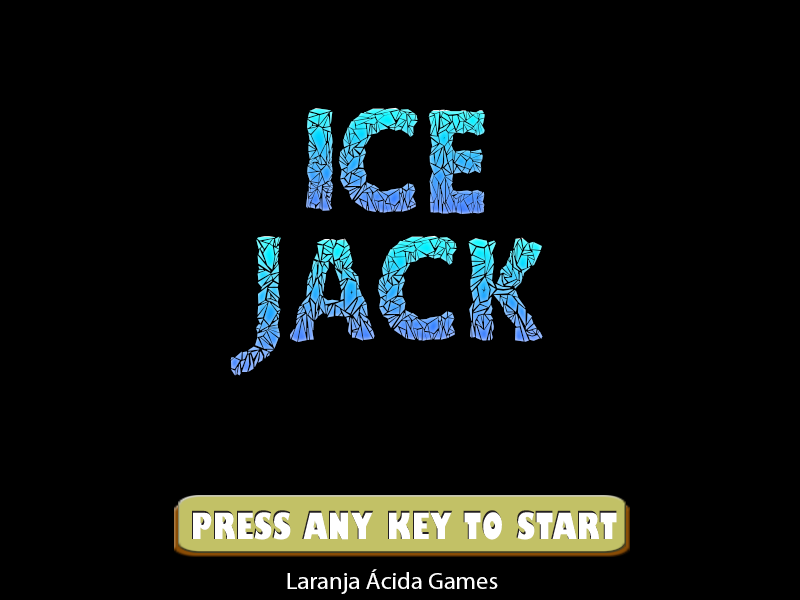
<style>
.page{position:relative;width:800px;height:600px;background:#000000}
.page>*{position:absolute;margin:0}
.t1{font:134.8px "CrystallineNegative";scale:0.93 1}
.t2{font:37.9px "GillSans-UltraBoldCondensed";color:#ffffff}
.t3{font:23.9px "MyriadPro-Regular";color:#ffffff}
</style>
<div class="page">
<p class="t1" style="left:306px;top:108px;width:27px;height:103px">I</p>
<p class="t1" style="left:338px;top:107px;width:80px;height:106px">C</p>
<p class="t1" style="left:428px;top:109px;width:57px;height:105px">E</p>
<p class="t1" style="left:230px;top:236px;width:51px;height:140px">J</p>
<p class="t1" style="left:290px;top:238px;width:85px;height:104px">A</p>
<p class="t1" style="left:377px;top:235px;width:80px;height:106px">C</p>
<p class="t1" style="left:468px;top:237px;width:75px;height:105px">K</p>
<p class="t2" style="left:192px;top:510px;width:425px;height:30px">PRESS ANY KEY TO START</p>
<p class="t3" style="left:287px;top:569px;width:211px;height:25px">Laranja Ácida Games</p>
</div>
